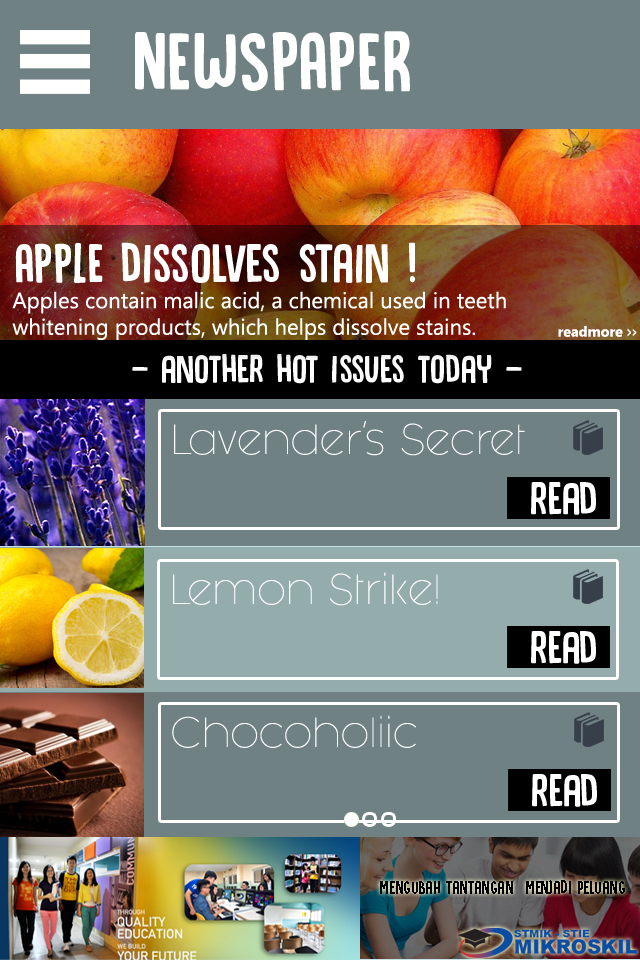
<style>
.page{position:relative;width:640px;height:960px;background:#6f8182}
.page>*{position:absolute;margin:0}
.t1{font:86.6px "DKCanoodle-Regular";color:#ffffff}
.t2{font:58.1px "DKCanoodle-Regular";color:#ffffff}
.t3{font:22.1px "Ebrima";color:#ffffff}
.t4{font:14.3px "Ebrima-Bold";color:#ffffff}
.t5{font:14.3px "Ebrima-Bold";color:#ffffff;scale:0.5 1}
.t6{font:41.1px "DKCanoodle-Regular";color:#ffffff}
.t7{font:35.4px "FashionFetishLight";color:#ffffff}
.t8{font:47.9px "DKCanoodle-Regular";color:#ffffff}
.t9{font:19.5px "DKCanoodle-Regular";color:#000000}
</style>
<div class="page">
<p class="t1" style="left:135px;top:31px;width:275px;height:61px">NEWSPAPER</p>
<p class="t2" style="left:15px;top:242px;width:400px;height:41px">APPLE dissolves stain !</p>
<p class="t3" style="left:12px;top:291px;width:494px;height:49px">Apples contain malic acid, a chemical used in teeth <br>whitening products, which helps dissolve stains.</p>
<p class="t4" style="left:558px;top:326px;width:79px;height:11px">readmore <span class="t5">&gt;&gt;</span></p>
<p class="t6" style="left:132px;top:354px;width:390px;height:30px">- another hot issues today -</p>
<p class="t7" style="left:174px;top:421px;width:351px;height:35px">Lavender’s Secret</p>
<p class="t8" style="left:531px;top:482px;width:65px;height:33px">read</p>
<p class="t7" style="left:173px;top:572px;width:265px;height:34px">Lemon Strike!</p>
<p class="t8" style="left:531px;top:631px;width:65px;height:33px">read</p>
<p class="t7" style="left:172px;top:715px;width:244px;height:33px">Chocoholiic</p>
<p class="t8" style="left:532px;top:774px;width:65px;height:33px">read</p>
<p class="t9" style="left:380px;top:880px;width:245px;height:14px">mengubah tantangan  menjadi peluang</p>
</div>
